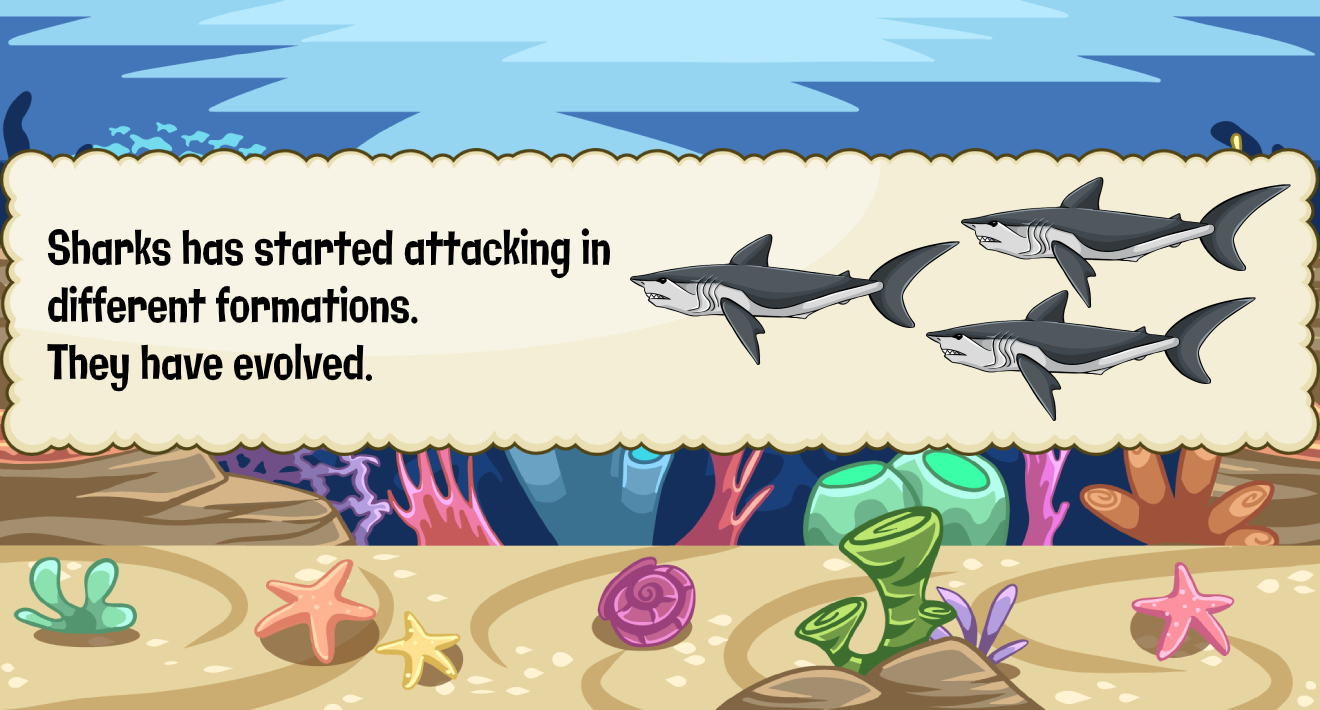
<style>
.page{position:relative;width:1320px;height:710px}
.page>*{position:absolute;margin:0}
.t1{font:47.9px "Galindo-Regular";color:#000000;scale:0.71 1}
</style>
<div class="page">
<p class="t1" style="left:47px;top:228px;width:563px;height:164px">Sharks has started attacking in <br>different formations.<br>They have evolved.</p>
</div>
